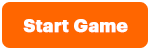
<style>
.page{position:relative;width:150px;height:50px;background:#ff6600}
.page>*{position:absolute;margin:0}
.t1{font:18px "Graphik-Bold";color:#ffffff;font-weight:bold}
</style>
<div class="page">
<p class="t1" style="left:23px;top:19px;width:105px;height:14px">Start Game</p>
</div>
